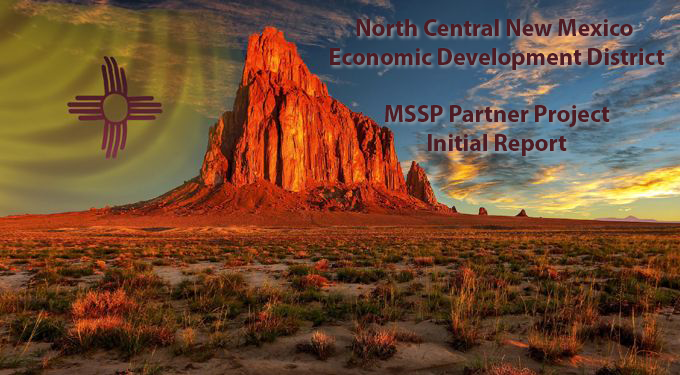
<style>
.page{position:relative;width:680px;height:375px}
.page>*{position:absolute;margin:0}
.t1{font:24px "MyriadPro-Bold";color:#4e1b24}
</style>
<div class="page">
<p class="t1" style="left:330px;top:19px;width:335px;height:137px;text-align:center">North Central New Mexico <br>Economic Development District<br><br>MSSP Partner Project<br>Initial Report</p>
</div>
